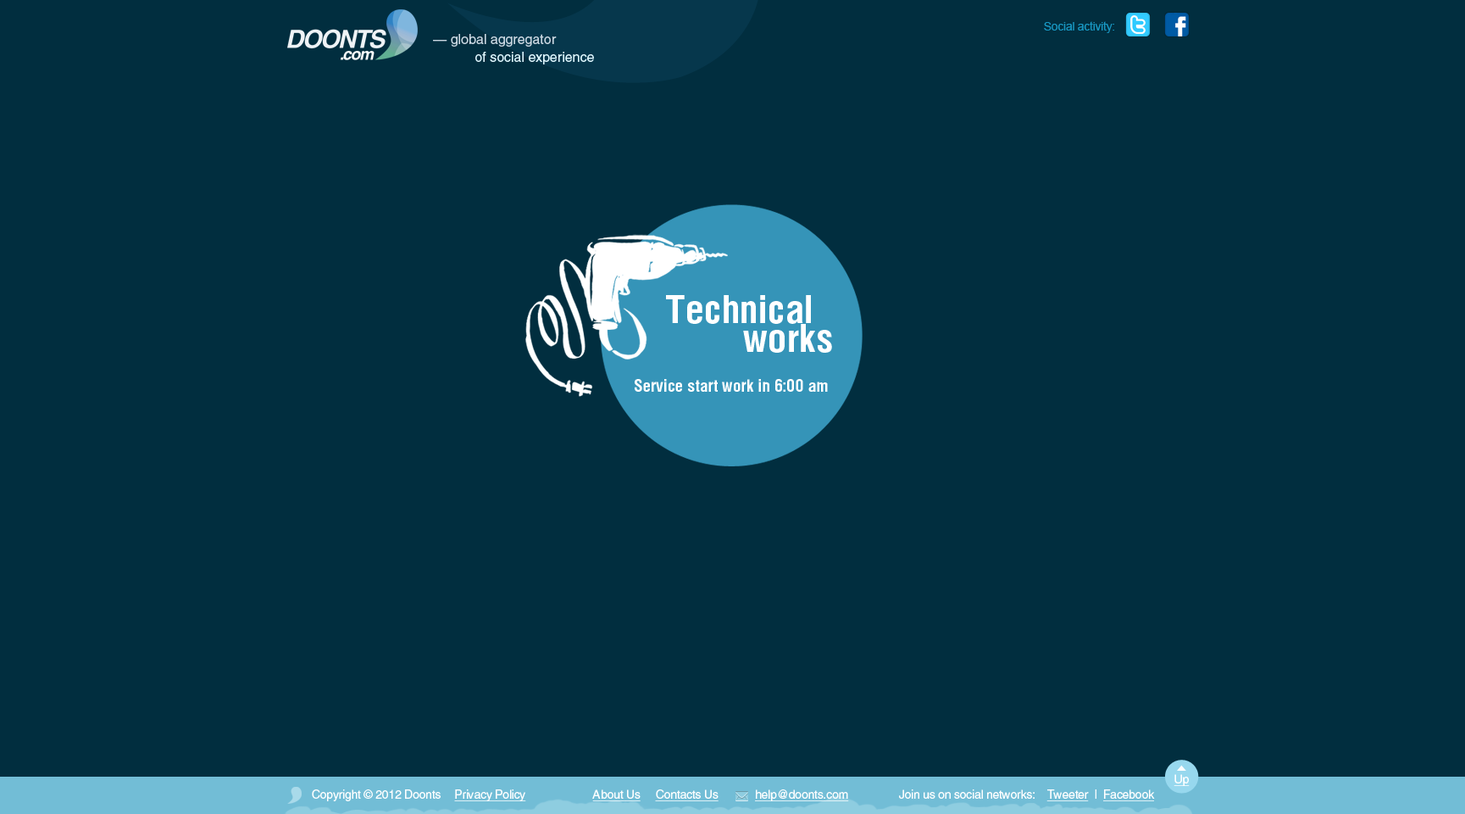
<style>
.page{position:relative;width:1465px;height:814px;background:#012e3f}
.page>*{position:absolute;margin:0}
.t1{font:11.9px "ArialMT";letter-spacing:-0.02em;color:#1898c3}
.t2{font:13.6px "Helvetica";color:#ccd8e2}
.t3{font:13.6px "Helvetica";color:#dff6fe}
.t4{font:39px/28.8px "HeliosCond-Bold";letter-spacing:0.01em;color:#ffffff}
.t5{font:17px "HeliosCond-Bold";letter-spacing:0.01em;color:#ffffff}
.t6{font:28.8px "HeliosCond-Bold";letter-spacing:0.01em;color:#ffffff}
.t7{font:11.9px "Helios";letter-spacing:-0.02em;color:#ffffff;text-decoration:underline}
.t8{font:11.9px "Helios";letter-spacing:-0.02em;color:#ffffff}
</style>
<div class="page">
<p class="t1" style="left:1044px;top:21px;width:71px;height:12px">Social activity:</p>
<p class="t2" style="left:433px;top:34px;width:124px;height:13px">— global aggregator</p>
<p class="t3" style="left:475px;top:52px;width:119px;height:12px">of social experience</p>
<p class="t4" style="left:666px;top:295px;width:166px;height:58px">Technical<br>        works</p>
<p class="t5" style="left:635px;top:379px;width:193px;height:13px"><span class="t6"><br><br></span>Service start work in 6:00 am</p>
<p class="t7" style="left:1174px;top:774px;width:16px;height:12px">Up</p>
<p class="t8" style="left:312px;top:789px;width:129px;height:12px">Copyright © 2012 Doonts</p>
<p class="t7" style="left:454px;top:789px;width:72px;height:12px">Privacy Policy</p>
<p class="t7" style="left:592px;top:789px;width:257px;height:12px">About Us     Contacts Us            help@doonts.com</p>
<p class="t8" style="left:899px;top:789px;width:136px;height:9px">Join us on social networks:</p>
<p class="t7" style="left:1047px;top:789px;width:108px;height:12px">Tweeter<span class="t8">  |  </span>Facebook</p>
</div>
